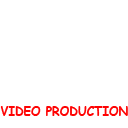
<style>
.page{position:relative;width:128px;height:128px;background:#ffffff}
.page>*{position:absolute;margin:0}
.t1{font:13.3px "ComicSansMS-Bold";color:#fe0303;scale:0.9 1}
</style>
<div class="page">
<p class="t1" style="left:0px;top:106px;width:128px;height:10px">VIDEO PRODUCTION</p>
</div>
